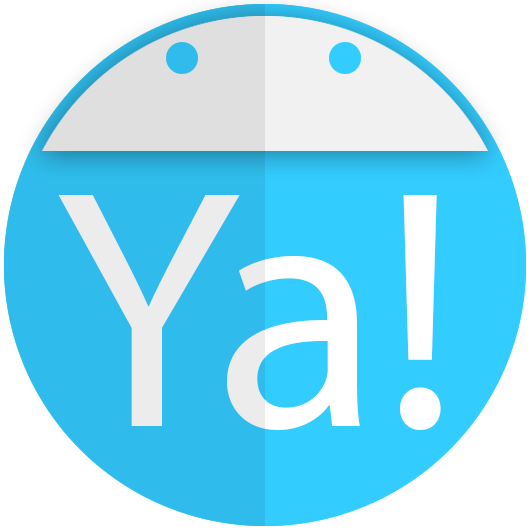
<style>
.page{position:relative;width:530px;height:530px;background:#ffffff}
.page>*{position:absolute;margin:0}
.t1{font:343.1px "MyriadPro-Regular";color:#ffffff}
</style>
<div class="page">
<p class="t1" style="left:58px;top:195px;width:383px;height:235px">Ya!</p>
</div>
